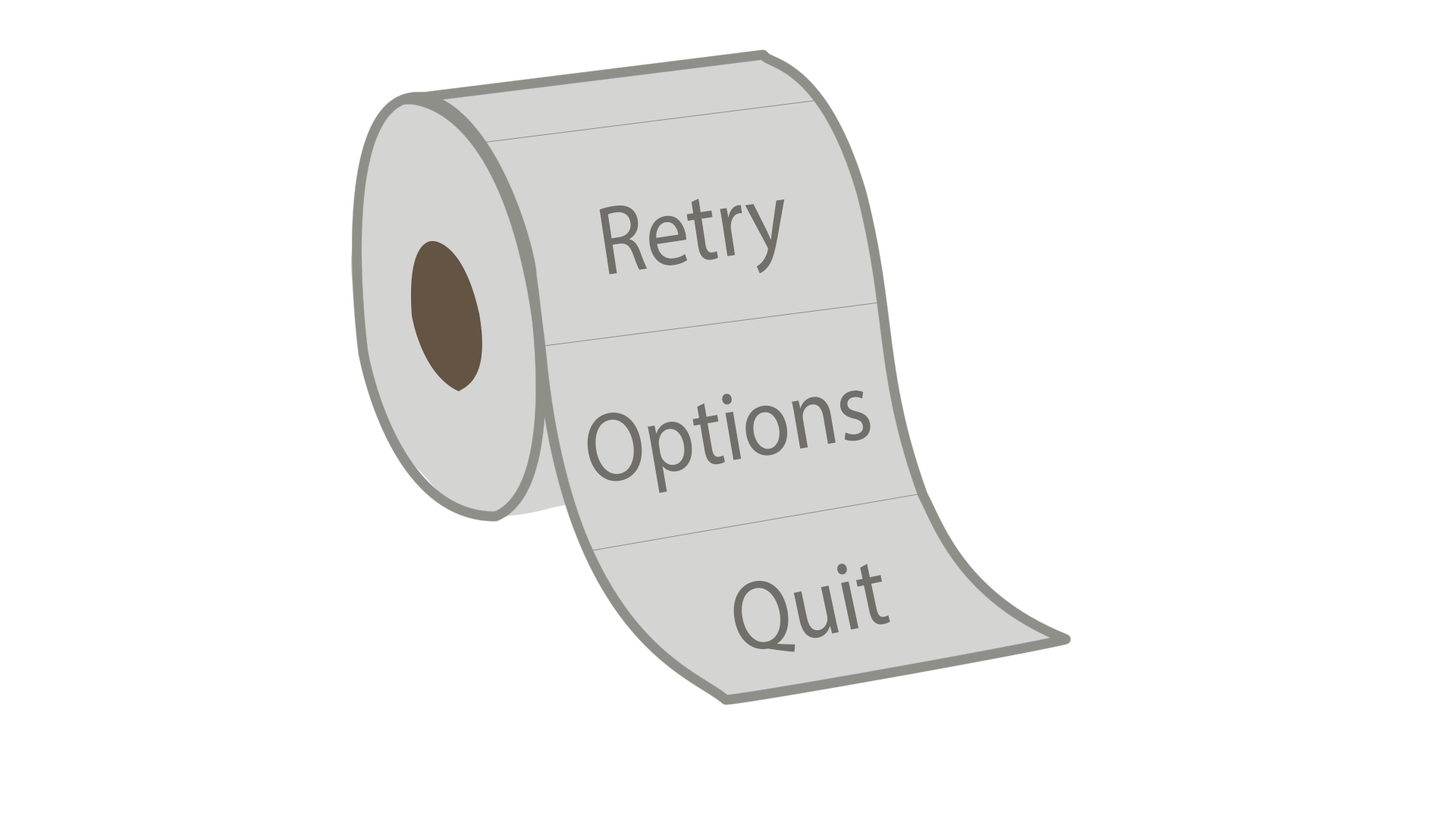
<style>
.page{position:relative;width:1456px;height:819px;background:#ffffff}
.page>*{position:absolute;margin:0}
.t1{font:98.5px "MyriadPro-Regular";color:#706f69;scale:0.88 1}
</style>
<div class="page">
<p class="t1" style="left:599px;top:198px;width:186px;height:77px;rotate:-9deg">Retry</p>
<p class="t1" style="left:587px;top:391px;width:284px;height:102px;rotate:-10deg">Options</p>
<p class="t1" style="left:733px;top:563px;width:157px;height:89px;rotate:-12deg">Quit</p>
</div>
